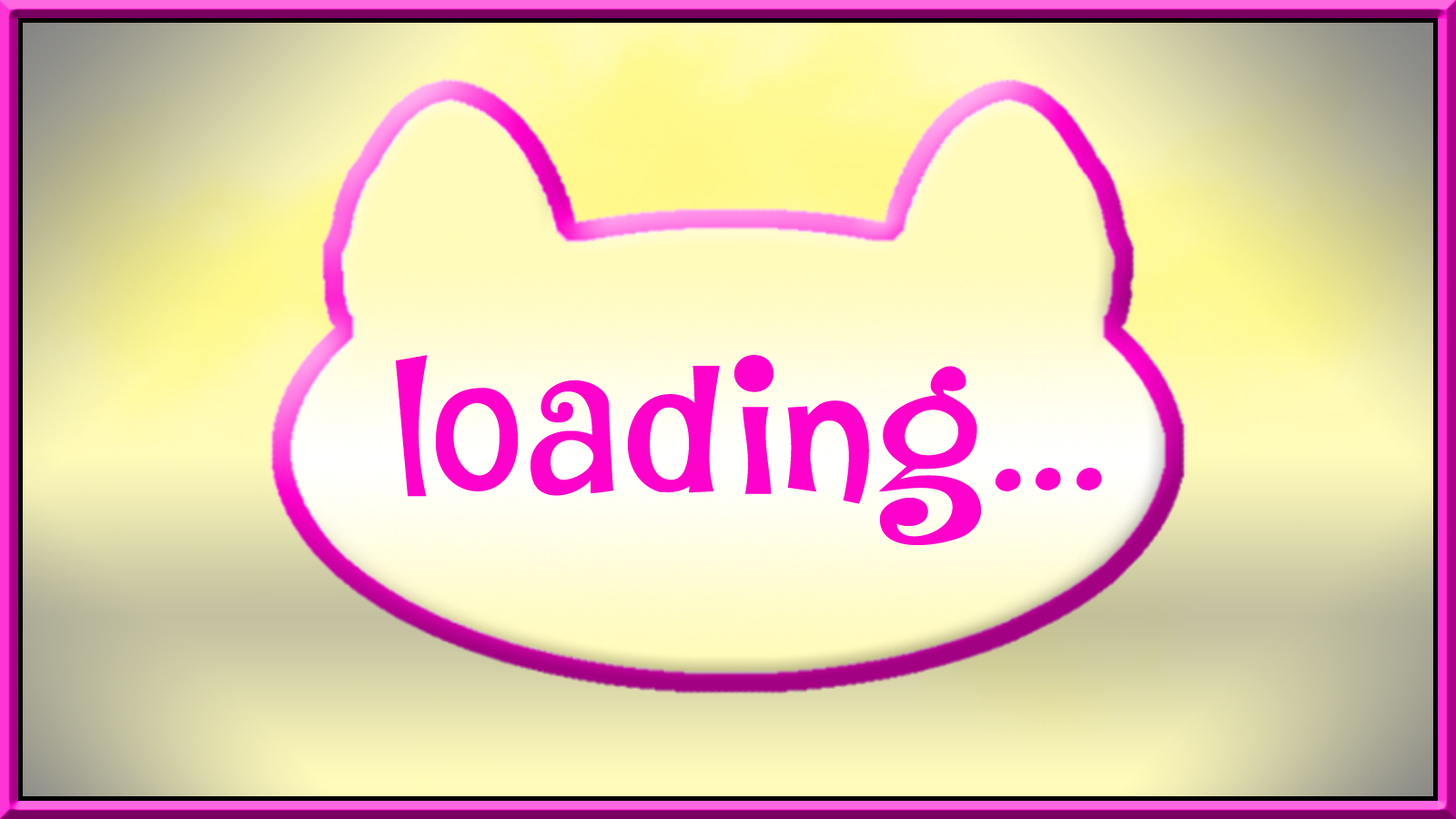
<style>
.page{position:relative;width:1456px;height:819px}
.page>*{position:absolute;margin:0}
.t1{font:182px "DKJambo";letter-spacing:0.05em;color:#fe01cb}
</style>
<div class="page">
<p class="t1" style="left:396px;top:355px;width:32px;height:142px">l</p>
<p class="t1" style="left:628px;top:366px;width:92px;height:127px">d</p>
<p class="t1" style="left:734px;top:355px;width:40px;height:139px">i</p>
<p class="t1" style="left:879px;top:366px;width:103px;height:179px">g</p>
<p class="t1" style="left:435px;top:388px;width:84px;height:103px">o</p>
<p class="t1" style="left:531px;top:379px;width:82px;height:117px">a</p>
<p class="t1" style="left:788px;top:400px;width:81px;height:104px">n</p>
<p class="t1" style="left:996px;top:469px;width:25px;height:22px">.</p>
<p class="t1" style="left:1036px;top:468px;width:25px;height:22px">.</p>
<p class="t1" style="left:1077px;top:468px;width:25px;height:22px">.</p>
</div>
